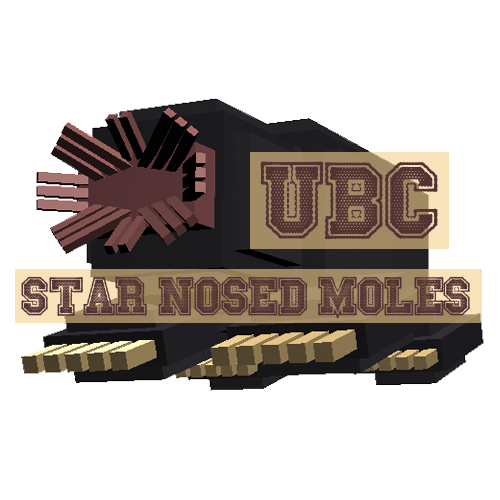
<style>
.page{position:relative;width:500px;height:500px;background:#ffffff}
.page>*{position:absolute;margin:0}
.t1{font:100px "FridayNightLights";color:#543233}
.t2{font:50px "FridayNightLights";color:#533233}
</style>
<div class="page">
<p class="t1" style="left:260px;top:161px;width:178px;height:79px">UBC</p>
<p class="t2" style="left:21px;top:276px;width:449px;height:43px">STAR NOSED MOLES</p>
</div>
